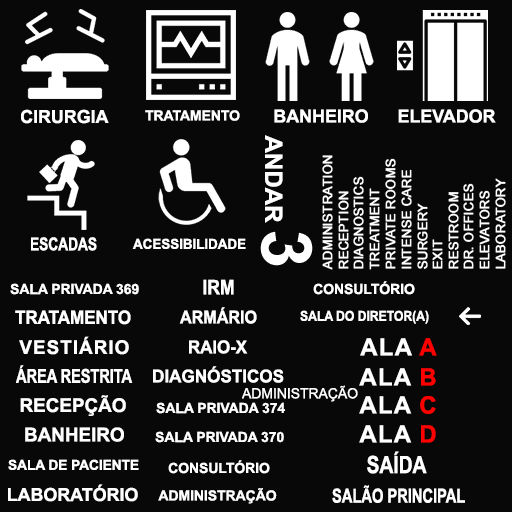
<style>
.page{position:relative;width:512px;height:512px;background:#080808}
.page>*{position:absolute;margin:0}
.t1{font:18px "Arial-BoldMT";letter-spacing:-0.005em;color:#ffffff}
.t2{font:14px "Arial-BoldMT";letter-spacing:-0.005em;color:#ffffff}
.t3{font:24px "Arial-BoldMT";letter-spacing:-0.005em;color:#ffffff}
.t4{font:17.8px "Arial-BoldMT";letter-spacing:-0.005em;color:#ffffff;scale:0.77 1}
.t5{font:13.8px "Arial-BoldMT";letter-spacing:-0.005em;color:#ffffff}
.t6{font:20px "Arial-BoldMT";letter-spacing:-0.005em;color:#ffffff;scale:0.89 1}
.t7{font:18.6px "Arial-BoldMT";letter-spacing:-0.01em;color:#ffffff;scale:0.92 1}
.t8{font:17.6px "Arial-BoldMT";letter-spacing:-0.005em;color:#ffffff;scale:0.92 1}
.t9{font:13.8px "Arial-BoldMT";letter-spacing:-0.005em;color:#ffffff;scale:0.89 1}
.t10{font:19px "Arial-BoldMT";letter-spacing:0.05em;color:#ffffff}
.t11{font:17.8px "Arial-BoldMT";letter-spacing:-0.005em;color:#ffffff;scale:0.95 1}
.t12{font:24px "Arial-BoldMT";letter-spacing:0.05em;color:#ffffff}
.t13{font:24px "Arial-BoldMT";letter-spacing:0.05em;color:#ff0000}
.t14{font:19.2px "Arial-BoldMT";letter-spacing:-0.01em;color:#ffffff;scale:0.77 1}
.t15{font:17.6px "Arial-BoldMT";letter-spacing:-0.005em;color:#ffffff}
.t16{font:14.2px "ArialMT";letter-spacing:-0.005em;color:#ffffff}
.t17{font:19px "Arial-BoldMT";letter-spacing:-0.005em;color:#ffffff}
.t18{font:23.8px "Arial-BoldMT";letter-spacing:-0.005em;color:#ffffff;scale:0.81 1}
.t19{font:19.5px "Arial-BoldMT";letter-spacing:-0.005em;color:#ffffff;scale:0.76 1}
</style>
<div class="page">
<p class="t1" style="left:21px;top:109px;width:88px;height:15px">CIRURGIA</p>
<p class="t2" style="left:145px;top:110px;width:95px;height:11px">TRATAMENTO</p>
<p class="t1" style="left:274px;top:109px;width:94px;height:14px">BANHEIRO</p>
<p class="t1" style="left:398px;top:109px;width:98px;height:14px">ELEVADOR</p>
<p class="t3" style="left:265px;top:135px;width:18px;height:88px;rotate:90deg">ANDAR</p>
<p class="t4" style="left:31px;top:237px;width:66px;height:14px">ESCADAS</p>
<p class="t5" style="left:132px;top:238px;width:114px;height:11px">ACESSIBILIDADE</p>
<p class="t6" style="left:203px;top:279px;width:31px;height:16px">IRM</p>
<p class="t2" style="left:313px;top:281px;width:102px;height:14px">CONSULTÓRIO</p>
<p class="t2" style="left:10px;top:283px;width:129px;height:12px">SALA PRIVADA 369</p>
<p class="t7" style="left:15px;top:310px;width:116px;height:15px">TRATAMENTO</p>
<p class="t8" style="left:179px;top:307px;width:78px;height:17px">ARMÁRIO</p>
<p class="t9" style="left:300px;top:310px;width:129px;height:14px">SALA DO DIRETOR(A)</p>
<p class="t10" style="left:19px;top:336px;width:110px;height:19px">VESTIÁRIO</p>
<p class="t11" style="left:189px;top:340px;width:59px;height:14px">RAIO-X</p>
<p class="t12" style="left:360px;top:338px;width:77px;height:18px">ALA <span class="t13">A</span></p>
<p class="t14" style="left:16px;top:365px;width:117px;height:19px">ÁREA RESTRITA</p>
<p class="t15" style="left:153px;top:366px;width:131px;height:17px">DIAGNÓSTICOS</p>
<p class="t12" style="left:359px;top:368px;width:77px;height:18px">ALA <span class="t13">B</span></p>
<p class="t16" style="left:242px;top:385px;width:116px;height:17px">ADMINISTRAÇÃO</p>
<p class="t17" style="left:20px;top:395px;width:106px;height:21px">RECEPÇÃO</p>
<p class="t12" style="left:359px;top:396px;width:77px;height:18px">ALA <span class="t13">C</span></p>
<p class="t2" style="left:156px;top:402px;width:129px;height:12px">SALA PRIVADA 374</p>
<p class="t12" style="left:359px;top:425px;width:77px;height:18px">ALA <span class="t13">D</span></p>
<p class="t17" style="left:25px;top:427px;width:99px;height:15px">BANHEIRO</p>
<p class="t2" style="left:155px;top:431px;width:129px;height:12px">SALA PRIVADA 370</p>
<p class="t5" style="left:8px;top:459px;width:131px;height:11px">SALA DE PACIENTE</p>
<p class="t2" style="left:168px;top:460px;width:102px;height:14px">CONSULTÓRIO</p>
<p class="t18" style="left:367px;top:451px;width:60px;height:23px">SAÍDA</p>
<p class="t1" style="left:8px;top:484px;width:130px;height:18px">LABORATÓRIO</p>
<p class="t19" style="left:332px;top:485px;width:133px;height:18px">SALÃO PRINCIPAL</p>
<p class="t2" style="left:158px;top:488px;width:119px;height:16px">ADMINISTRAÇÃO</p>
</div>
